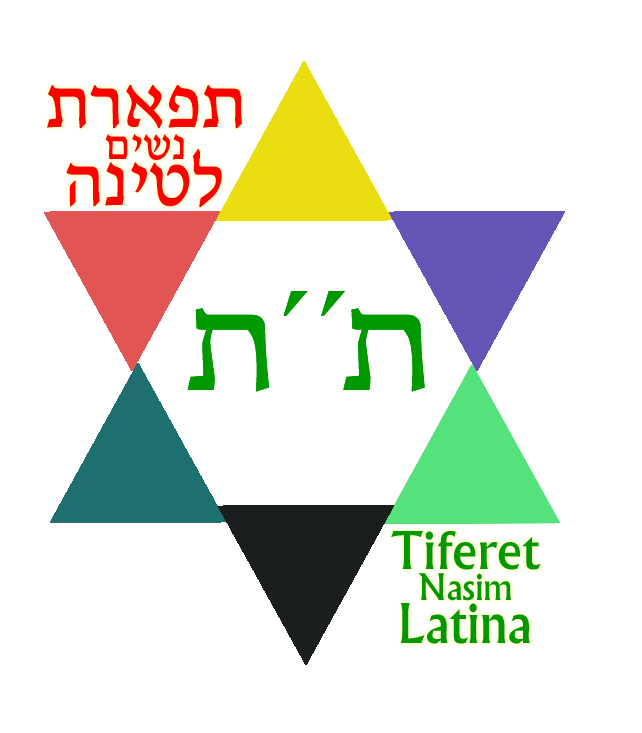
<style>
.page{position:relative;width:642px;height:733px;background:#ffffff}
.page>*{position:absolute;margin:0}
.t1{font:77.6px "Narkisim";letter-spacing:-0.01em;color:#ff0000}
.t2{font:45.3px "Narkisim";color:#ff0000}
.t3{font:145.5px "David";letter-spacing:-0.075em;color:#009900}
.t4{font:145.5px "HadassahFriedlaender";letter-spacing:-0.075em;color:#009900}
.t5{font:55.3px "Narkisim";color:#009900;scale:1.05 1}
.t6{font:38.8px "Narkisim";color:#009900}
.t7{font:58.2px "Narkisim";color:#009900}
</style>
<div class="page">
<p class="t1" style="left:47px;top:85px;width:195px;height:44px">תראפת</p>
<p class="t2" style="left:105px;top:134px;width:79px;height:26px">םישנ</p>
<p class="t1" style="left:66px;top:149px;width:156px;height:59px">הניטל</p>
<p class="t3" style="left:187px;top:291px;width:238px;height:101px"><span class="t4">ת</span>´´<span class="t4">ת</span></p>
<p class="t5" style="left:391px;top:531px;width:150px;height:39px">Tiferet</p>
<p class="t6" style="left:418px;top:573px;width:93px;height:28px">Nasim</p>
<p class="t7" style="left:401px;top:603px;width:129px;height:41px">Latina</p>
</div>
